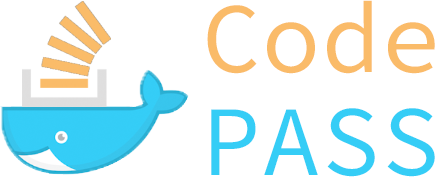
<style>
.page{position:relative;width:435px;height:177px;background:#ffffff}
.page>*{position:absolute;margin:0}
.t1{font:100px "SourceCodePro-Regular";color:#fabb69}
.t2{font:100px "SourceCodePro-Regular";color:#35cdf6}
</style>
<div class="page">
<p class="t1" style="left:207px;top:0px;width:228px;height:74px">Code</p>
<p class="t2" style="left:211px;top:108px;width:224px;height:69px">PASS</p>
</div>
